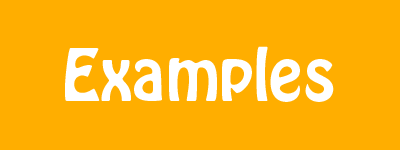
<style>
.page{position:relative;width:400px;height:150px;background:#ffae00}
.page>*{position:absolute;margin:0}
.t1{font:63.7px "HoboStd";color:#ffffff}
</style>
<div class="page">
<p class="t1" style="left:65px;top:46px;width:269px;height:56px">Examples</p>
</div>
